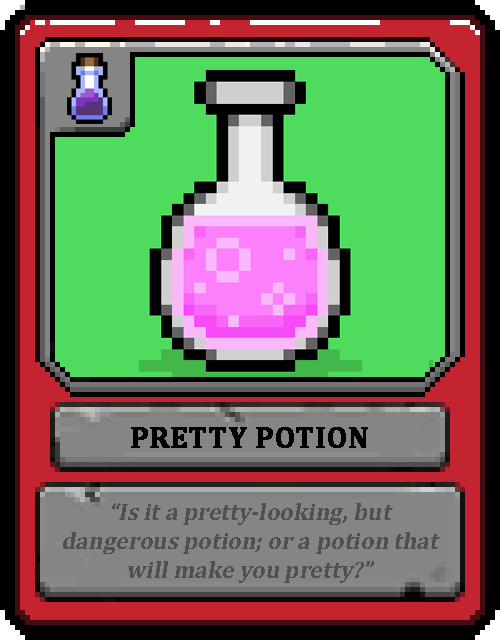
<style>
.page{position:relative;width:500px;height:640px;background:#4fdb5d}
.page>*{position:absolute;margin:0}
.t1{font:30px "Cambria-Bold";color:#000000;text-transform:uppercase;font-weight:bold}
.t2{font:24px "Cambria-Bold";color:#505050;font-style:italic}
</style>
<div class="page">
<p class="t1" style="left:131px;top:427px;width:237px;height:21px">Pretty Potion</p>
<p class="t2" style="left:63px;top:503px;width:377px;height:80px;text-align:center">“Is it a pretty-looking, but dangerous potion; or a potion that will make you pretty?”</p>
</div>
